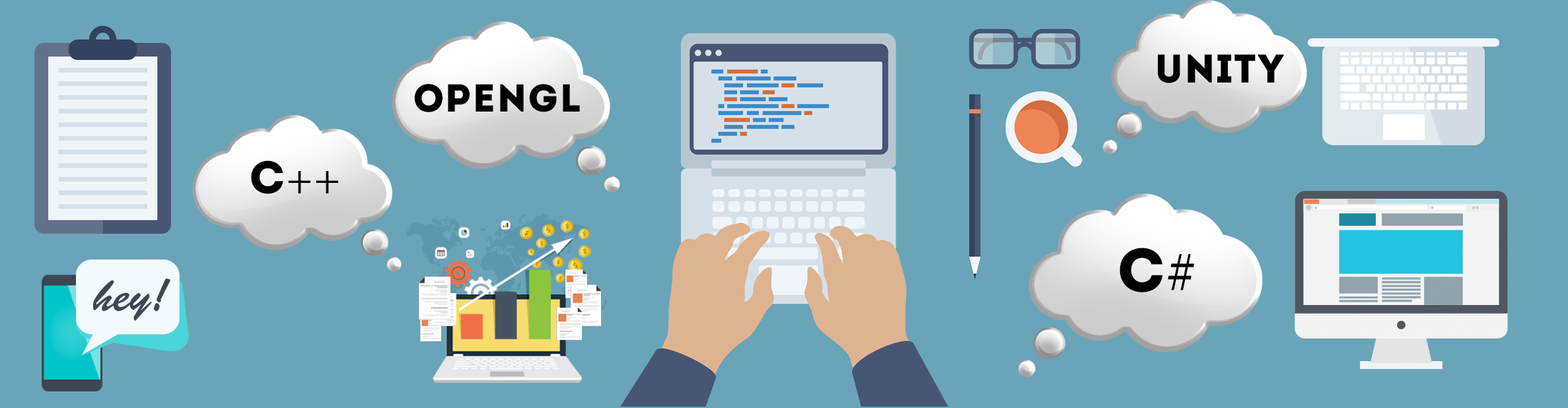
<style>
.page{position:relative;width:1568px;height:408px;background:#6aa4b8}
.page>*{position:absolute;margin:0}
.t1{font:40.1px "Intro";letter-spacing:0.02em;color:#000000;text-transform:uppercase}
.t2{font:38.9px "Intro";letter-spacing:0.02em;color:#000000;text-transform:uppercase}
.t3{font:46.3px "MinionPro-Regular";letter-spacing:0.02em;color:#000000;text-transform:uppercase}
.t4{font:46.3px "Intro";letter-spacing:0.02em;color:#000000;text-transform:uppercase}
.t5{font:62px "Intro";letter-spacing:0.02em;color:#000000;text-transform:uppercase}
.t6{font:62px "MinionPro-Regular";letter-spacing:0.02em;color:#000000;text-transform:uppercase}
</style>
<div class="page">
<p class="t1" style="left:1158px;top:54px;width:126px;height:29px">UNITY</p>
<p class="t2" style="left:414px;top:84px;width:166px;height:28px">OPENGL</p>
<p class="t3" style="left:251px;top:160px;width:87px;height:34px"><span class="t4">C</span>++</p>
<p class="t5" style="left:1120px;top:248px;width:74px;height:45px">C<span class="t6">#</span></p>
</div>
